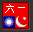
<style>
.page{position:relative;width:33px;height:32px;background:#f20000}
.page>*{position:absolute;margin:0}
.t1{font:10.4px "SimSun";color:#ffffff}
</style>
<div class="page">
<p class="t1" style="left:5px;top:4px;width:20px;height:9px">六一</p>
</div>
